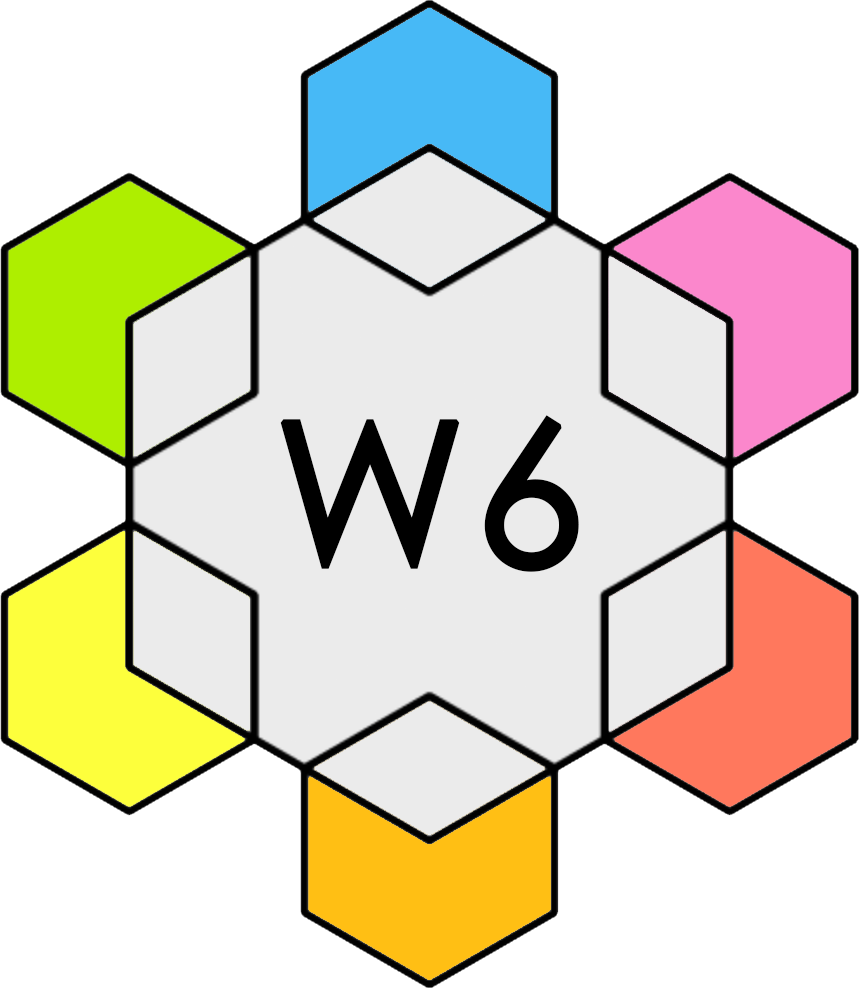
<style>
.page{position:relative;width:859px;height:988px;background:#ffffff}
.page>*{position:absolute;margin:0}
.t1{font:200px "CenturyGothic";letter-spacing:0.01em;color:#000000;font-weight:bold}
</style>
<div class="page">
<p class="t1" style="left:280px;top:415px;width:299px;height:157px">W6</p>
</div>
